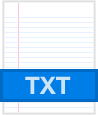
<style>
.page{position:relative;width:98px;height:115px;background:#ffffff}
.page>*{position:absolute;margin:0}
.t1{font:24px "HelveticaNeue-Bold";color:#cce3f6}
</style>
<div class="page">
<p class="t1" style="left:25px;top:76px;width:46px;height:18px">TXT</p>
</div>
